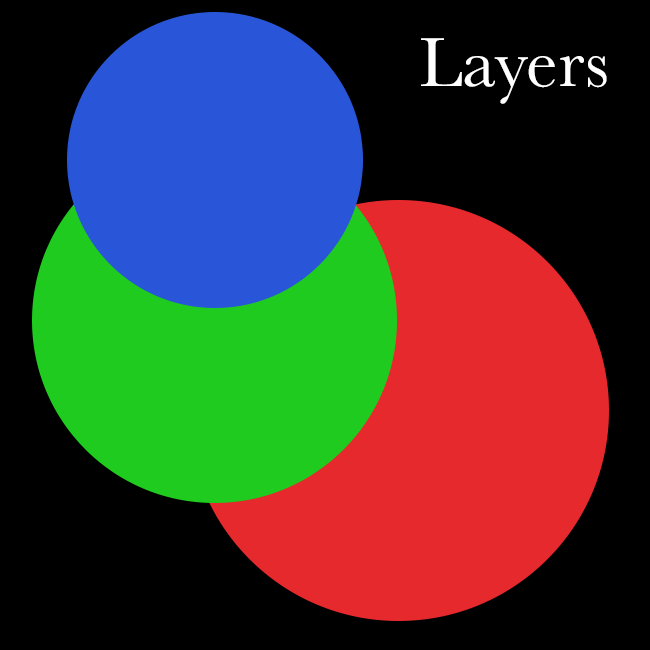
<style>
.page{position:relative;width:650px;height:650px;background:#000000}
.page>*{position:absolute;margin:0}
.t1{font:72px "Baskerville";color:#ffffff}
</style>
<div class="page">
<p class="t1" style="left:421px;top:38px;width:186px;height:66px">Layers</p>
</div>
